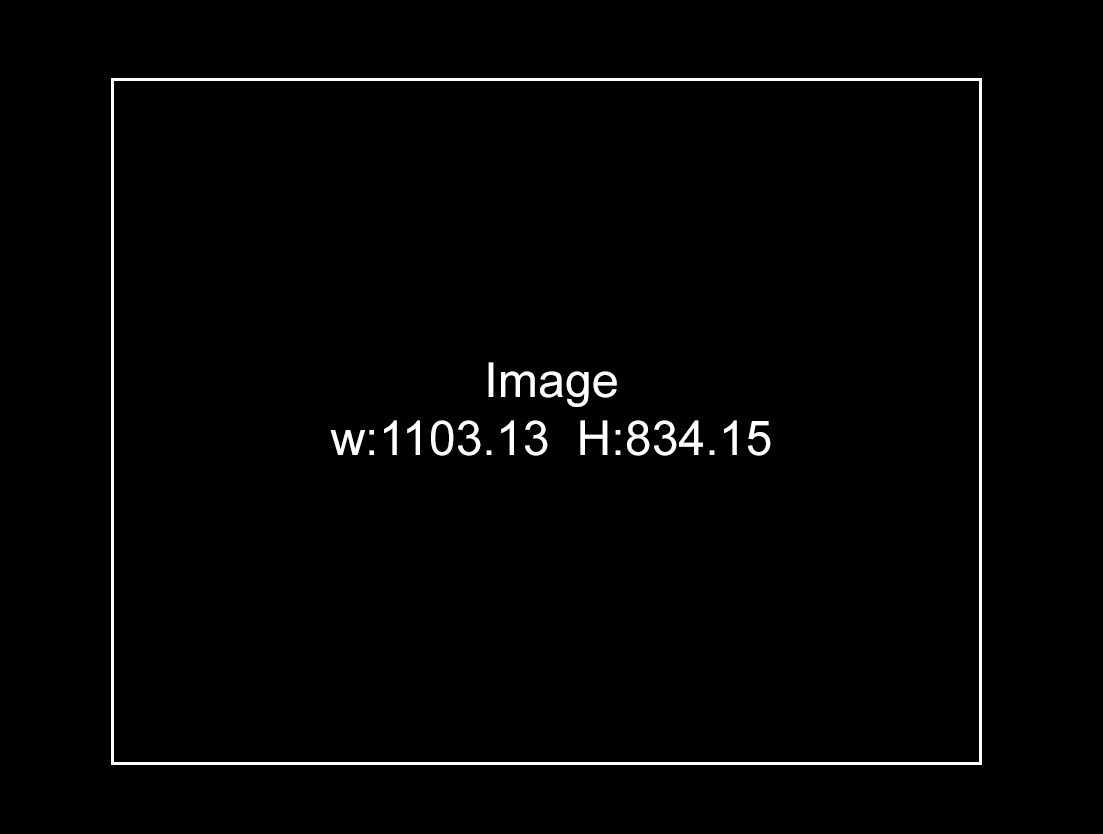
<style>
.page{position:relative;width:1103px;height:834px;background:#000000}
.page>*{position:absolute;margin:0}
.t1{font:48.3px "ArialMT";color:#ffffff}
</style>
<div class="page">
<p class="t1" style="left:330px;top:362px;width:441px;height:94px;text-align:center">Image<br>w:1103.13  H:834.15</p>
</div>
